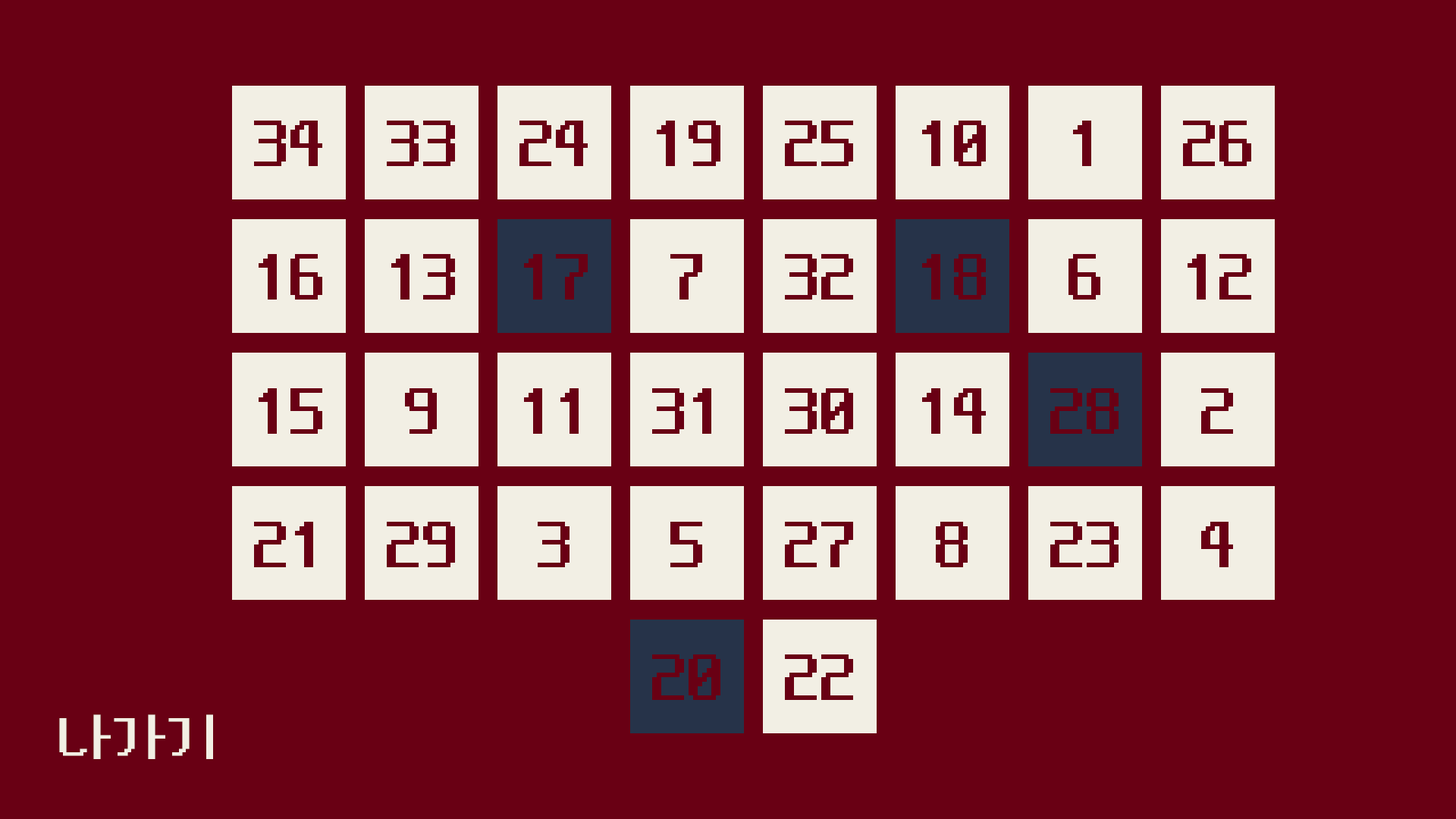
<style>
.page{position:relative;width:1456px;height:819px;background:#690014}
.page>*{position:absolute;margin:0}
.t1{font:72.8px "NeoDunggeunmoCode-Regular";color:#690014}
.t2{font:54.6px "NeoDunggeunmoCode-Regular";color:#f2efe4}
</style>
<div class="page">
<p class="t1" style="left:254px;top:121px;width:68px;height:45px">34</p>
<p class="t1" style="left:387px;top:121px;width:68px;height:45px">33</p>
<p class="t1" style="left:519px;top:121px;width:69px;height:45px">24</p>
<p class="t1" style="left:657px;top:121px;width:63px;height:45px">19</p>
<p class="t1" style="left:785px;top:121px;width:68px;height:45px">25</p>
<p class="t1" style="left:922px;top:121px;width:64px;height:45px">10</p>
<p class="t1" style="left:1073px;top:121px;width:18px;height:45px">1</p>
<p class="t1" style="left:1183px;top:121px;width:68px;height:45px">26</p>
<p class="t1" style="left:259px;top:254px;width:63px;height:46px">16</p>
<p class="t1" style="left:391px;top:254px;width:64px;height:46px">13</p>
<p class="t1" style="left:524px;top:254px;width:64px;height:46px">17</p>
<p class="t1" style="left:670px;top:254px;width:32px;height:46px">7</p>
<p class="t1" style="left:785px;top:254px;width:68px;height:46px">32</p>
<p class="t1" style="left:922px;top:254px;width:64px;height:46px">18</p>
<p class="t1" style="left:1068px;top:254px;width:32px;height:46px">6</p>
<p class="t1" style="left:1188px;top:254px;width:63px;height:46px">12</p>
<p class="t1" style="left:259px;top:388px;width:63px;height:46px">15</p>
<p class="t1" style="left:405px;top:388px;width:32px;height:46px">9</p>
<p class="t1" style="left:524px;top:388px;width:55px;height:46px">11</p>
<p class="t1" style="left:652px;top:388px;width:59px;height:46px">31</p>
<p class="t1" style="left:785px;top:388px;width:68px;height:46px">30</p>
<p class="t1" style="left:922px;top:388px;width:64px;height:46px">14</p>
<p class="t1" style="left:1050px;top:388px;width:69px;height:46px">28</p>
<p class="t1" style="left:1201px;top:388px;width:32px;height:46px">2</p>
<p class="t1" style="left:254px;top:522px;width:59px;height:45px">21</p>
<p class="t1" style="left:387px;top:522px;width:68px;height:45px">29</p>
<p class="t1" style="left:538px;top:522px;width:32px;height:45px">3</p>
<p class="t1" style="left:670px;top:522px;width:32px;height:45px">5</p>
<p class="t1" style="left:785px;top:522px;width:68px;height:45px">27</p>
<p class="t1" style="left:936px;top:522px;width:32px;height:45px">8</p>
<p class="t1" style="left:1050px;top:522px;width:69px;height:45px">23</p>
<p class="t1" style="left:1201px;top:522px;width:32px;height:45px">4</p>
<p class="t1" style="left:652px;top:654px;width:68px;height:46px">20</p>
<p class="t1" style="left:785px;top:654px;width:68px;height:46px">22</p>
<p class="t2" style="left:59px;top:714px;width:154px;height:45px">나가기</p>
</div>
